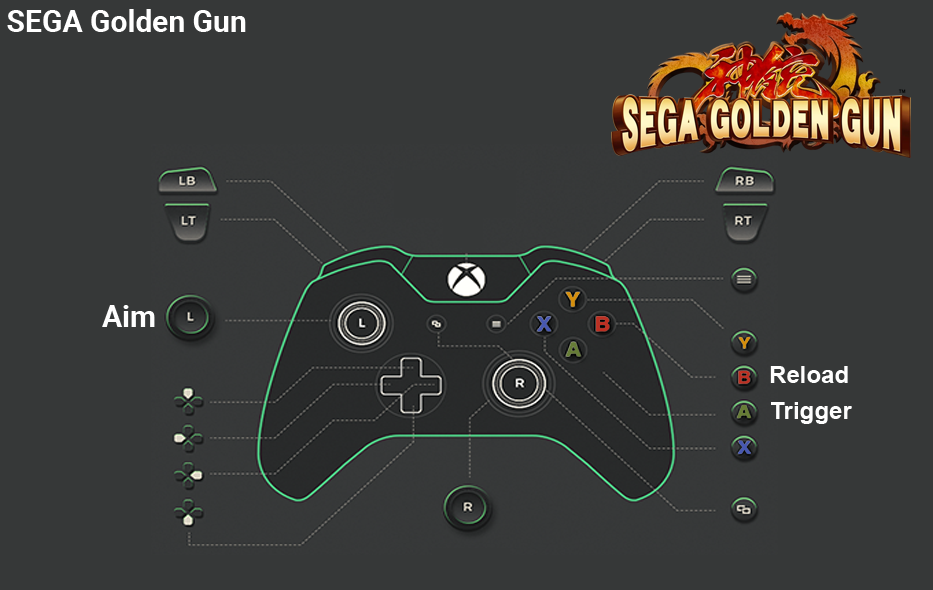
<style>
.page{position:relative;width:933px;height:590px;background:#363838}
.page>*{position:absolute;margin:0}
.t1{font:30px "Roboto-Bold";color:#ffffff}
.t2{font:30px "Roboto-Bold";color:#fefefe}
.t3{font:24px "Arial-BoldMT";color:#fefefe}
</style>
<div class="page">
<p class="t1" style="left:7px;top:9px;width:239px;height:23px">SEGA Golden Gun</p>
<p class="t2" style="left:102px;top:305px;width:53px;height:22px">Aim</p>
<p class="t3" style="left:770px;top:366px;width:78px;height:17px">Reload</p>
<p class="t3" style="left:771px;top:402px;width:81px;height:22px">Trigger</p>
</div>
